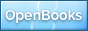
<style>
.page{position:relative;width:88px;height:31px}
.page>*{position:absolute;margin:0}
.t1{font:14px "Raleway-Bold";color:#ffffff}
</style>
<div class="page">
<p class="t1" style="left:5px;top:9px;width:77px;height:14px">OpenBooks</p>
</div>
